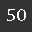
<style>
.page{position:relative;width:32px;height:32px;background:#333333}
.page>*{position:absolute;margin:0}
.t1{font:17.8px "MyriadPro-Regular";color:#ffffff;scale:1.12 1}
</style>
<div class="page">
<p class="t1" style="left:7px;top:9px;width:19px;height:12px">50</p>
</div>
